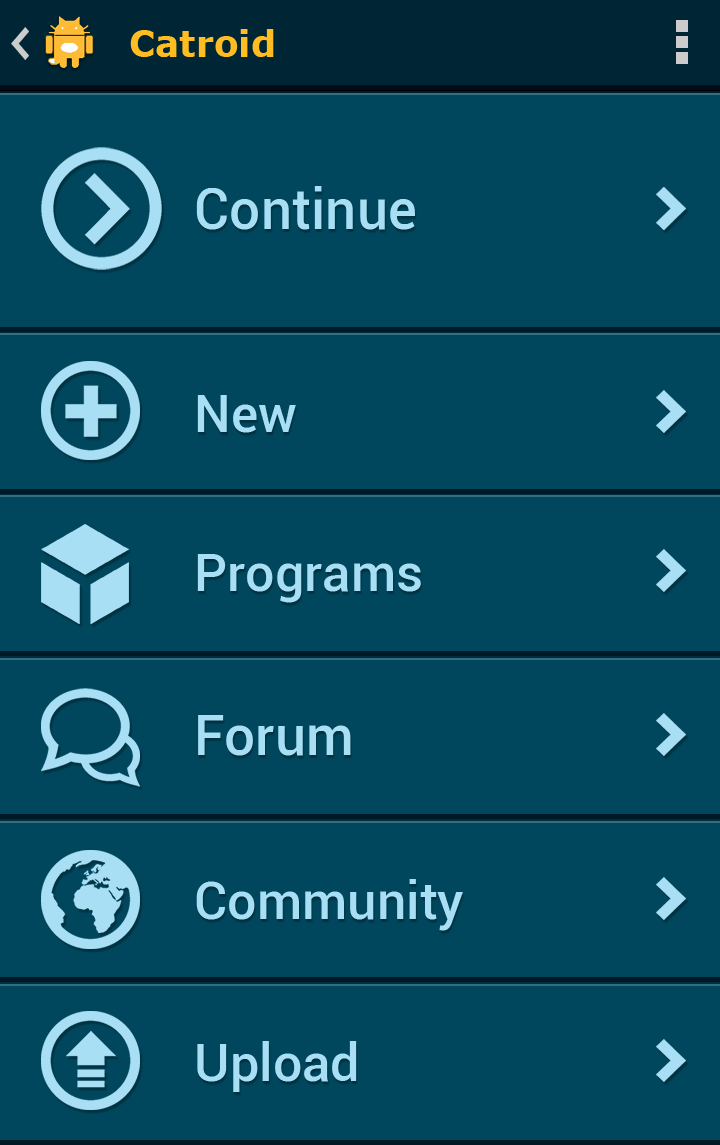
<style>
.page{position:relative;width:720px;height:1145px;background:#00475e}
.page>*{position:absolute;margin:0}
.t1{font:36px "Verdana-Bold";color:#ffbd21}
.t2{font:56px "Roboto-Medium";color:#a8dff4}
.t3{font:52px "Roboto-Medium";color:#a8dff4}
.t4{font:55px "Roboto-Medium";color:#a8dff4}
</style>
<div class="page">
<p class="t1" style="left:130px;top:29px;width:144px;height:28px">Catroid</p>
<p class="t2" style="left:196px;top:186px;width:219px;height:44px">Continue</p>
<p class="t3" style="left:197px;top:395px;width:99px;height:38px">New</p>
<p class="t3" style="left:197px;top:554px;width:224px;height:49px">Programs</p>
<p class="t4" style="left:198px;top:715px;width:153px;height:41px">Forum</p>
<p class="t3" style="left:196px;top:879px;width:267px;height:52px">Community</p>
<p class="t3" style="left:197px;top:1041px;width:160px;height:51px">Upload</p>
</div>
